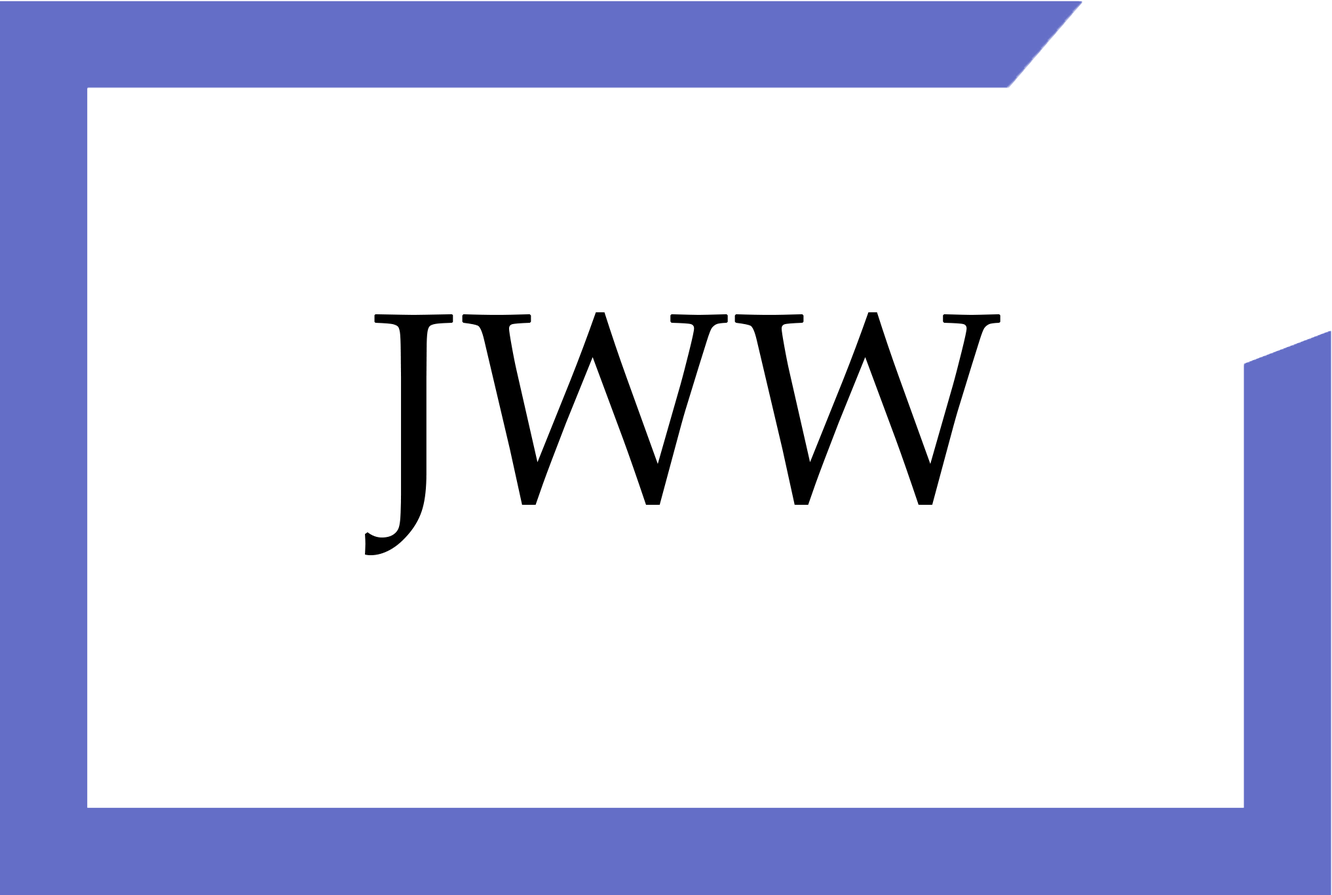
<style>
.page{position:relative;width:1332px;height:895px;background:#ffffff}
.page>*{position:absolute;margin:0}
.t1{font:272.9px "PalatinoLinotype-Roman";color:#000000}
</style>
<div class="page">
<p class="t1" style="left:365px;top:312px;width:635px;height:243px">JWW</p>
</div>
